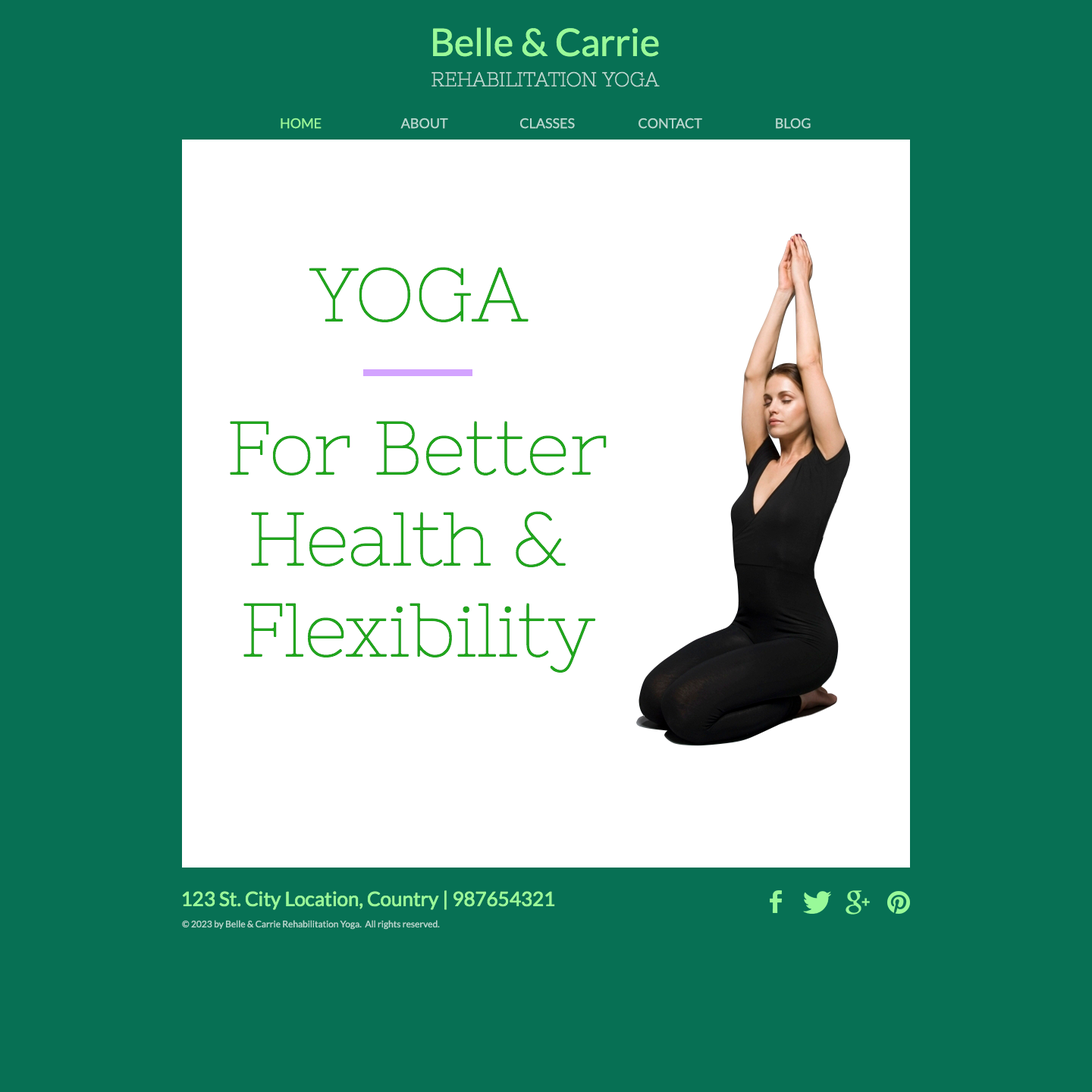
<style>
.page{position:relative;width:1092px;height:1092px;background:#077054}
.page>*{position:absolute;margin:0}
.t1{font:19.7px/15.2px "NixieOne-Regular";color:#b6d8cf;text-transform:uppercase}
.t2{font:37.9px/15.2px "Lato-Regular";color:#99fa99}
.t3{font:13.6px "Lato-Regular";color:#99fa99;text-transform:uppercase}
.t4{font:13.6px "Lato-Regular";color:#b6d8cf;text-transform:uppercase}
.t5{font:75.8px "NixieOne-Regular";color:#21a51e}
.t6{font:75.8px/91px "NixieOne-Regular";color:#21a51e}
.t7{font:19.7px "Lato-Regular";color:#99fa99}
.t8{font:9.1px "Lato-Regular";color:#b6d8cf}
.t9{font:9.1px "Lato-Regular";color:#b6d8cf;text-transform:uppercase}
</style>
<div class="page">
<p class="t1" style="left:431px;top:27px;width:229px;height:60px;text-align:center"><span class="t2">Belle &amp; Carrie<br><br></span>Rehabilitation Yoga</p>
<p class="t3" style="left:281px;top:118px;width:41px;height:11px">home</p>
<p class="t4" style="left:400px;top:118px;width:48px;height:11px">about</p>
<p class="t4" style="left:519px;top:118px;width:56px;height:11px">classes</p>
<p class="t4" style="left:639px;top:118px;width:63px;height:11px">contact</p>
<p class="t4" style="left:776px;top:118px;width:35px;height:11px">blog</p>
<p class="t5" style="left:309px;top:267px;width:220px;height:55px">YOGA</p>
<p class="t6" style="left:230px;top:421px;width:377px;height:252px;text-align:center">For Better<br>Health &amp; <br>Flexibility</p>
<p class="t7" style="left:182px;top:890px;width:373px;height:20px">123 St. City Location, Country | 987654321</p>
<p class="t8" style="left:182px;top:920px;width:258px;height:10px"><span class="t9">© 2023 </span>by Belle &amp; Carrie Rehabilitation Yoga<span class="t9">.  </span>All rights reserved.</p>
</div>
